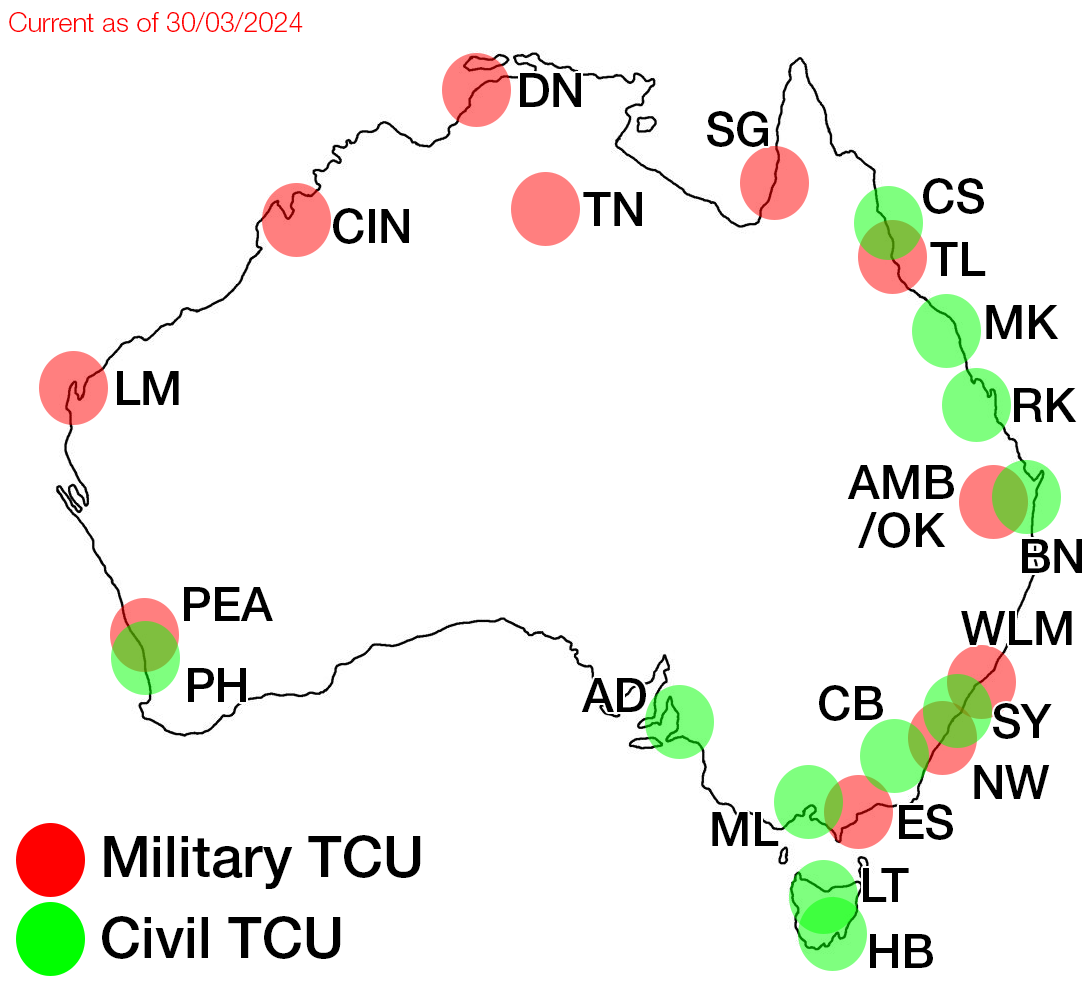
<style>
.page{position:relative;width:1091px;height:994px;background:#ffffff}
.page>*{position:absolute;margin:0}
.t1{font:26.9px "HelveticaNeueLTStd-Lt";color:#ff0000}
.t2{font:47.4px "HelveticaNeueLTStd-Md";color:#000000}
.t3{font:47.4px/48px "HelveticaNeueLTStd-Md";color:#000000}
.t4{font:57.1px "HelveticaNeueLTStd-Md";color:#000000}
</style>
<div class="page">
<p class="t1" style="left:9px;top:12px;width:294px;height:20px">Current as of 30/03/2024</p>
<p class="t2" style="left:520px;top:73px;width:61px;height:34px">DN</p>
<p class="t2" style="left:707px;top:111px;width:61px;height:36px">SG</p>
<p class="t2" style="left:923px;top:178px;width:61px;height:36px">CS</p>
<p class="t2" style="left:583px;top:192px;width:59px;height:34px">TN</p>
<p class="t2" style="left:333px;top:208px;width:76px;height:36px">CIN</p>
<p class="t2" style="left:930px;top:242px;width:56px;height:34px">TL</p>
<p class="t2" style="left:986px;top:305px;width:73px;height:34px">MK</p>
<p class="t2" style="left:117px;top:371px;width:62px;height:34px">LM</p>
<p class="t2" style="left:1014px;top:388px;width:63px;height:34px">RK</p>
<p class="t3" style="left:847px;top:465px;width:107px;height:83px;text-align:center">AMB<br>/OK</p>
<p class="t2" style="left:1022px;top:539px;width:60px;height:34px">BN</p>
<p class="t2" style="left:184px;top:587px;width:89px;height:34px">PEA</p>
<p class="t2" style="left:961px;top:611px;width:111px;height:34px">WLM</p>
<p class="t2" style="left:188px;top:668px;width:58px;height:34px">PH</p>
<p class="t2" style="left:581px;top:678px;width:65px;height:34px">AD</p>
<p class="t2" style="left:819px;top:685px;width:64px;height:36px">CB</p>
<p class="t2" style="left:993px;top:703px;width:59px;height:36px">SY</p>
<p class="t2" style="left:974px;top:765px;width:76px;height:34px">NW</p>
<p class="t2" style="left:899px;top:804px;width:54px;height:36px">ES</p>
<p class="t2" style="left:712px;top:812px;width:67px;height:34px">ML</p>
<p class="t4" style="left:104px;top:835px;width:317px;height:54px">Military TCU</p>
<p class="t2" style="left:863px;top:868px;width:46px;height:34px">LT</p>
<p class="t4" style="left:102px;top:916px;width:239px;height:43px">Civil TCU</p>
<p class="t2" style="left:870px;top:934px;width:63px;height:34px">HB</p>
</div>
